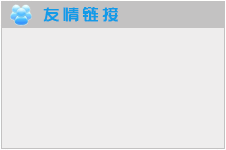
<style>
.page{position:relative;width:226px;height:150px;background:#eeeded}
.page>*{position:absolute;margin:0}
.t1{font:16px "TRENDS";letter-spacing:0.2em;color:#139be7;font-weight:bold}
</style>
<div class="page">
<p class="t1" style="left:43px;top:7px;width:75px;height:15px">友情链接</p>
</div>
